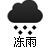
<style>
.page{position:relative;width:50px;height:48px;background:#ffffff}
.page>*{position:absolute;margin:0}
.t1{font:12px "OPPOSans-R";color:#000000}
</style>
<div class="page">
<p class="t1" style="left:14px;top:36px;width:22px;height:11px">冻雨</p>
</div>
